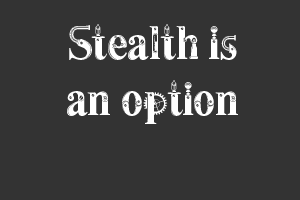
<style>
.page{position:relative;width:300px;height:200px;background:#333333}
.page>*{position:absolute;margin:0}
.t1{font:47px "Steamy";letter-spacing:-0.04em;color:#ffffff}
</style>
<div class="page">
<p class="t1" style="left:67px;top:24px;width:171px;height:100px;text-align:center">Stealth is<br>an option</p>
</div>
